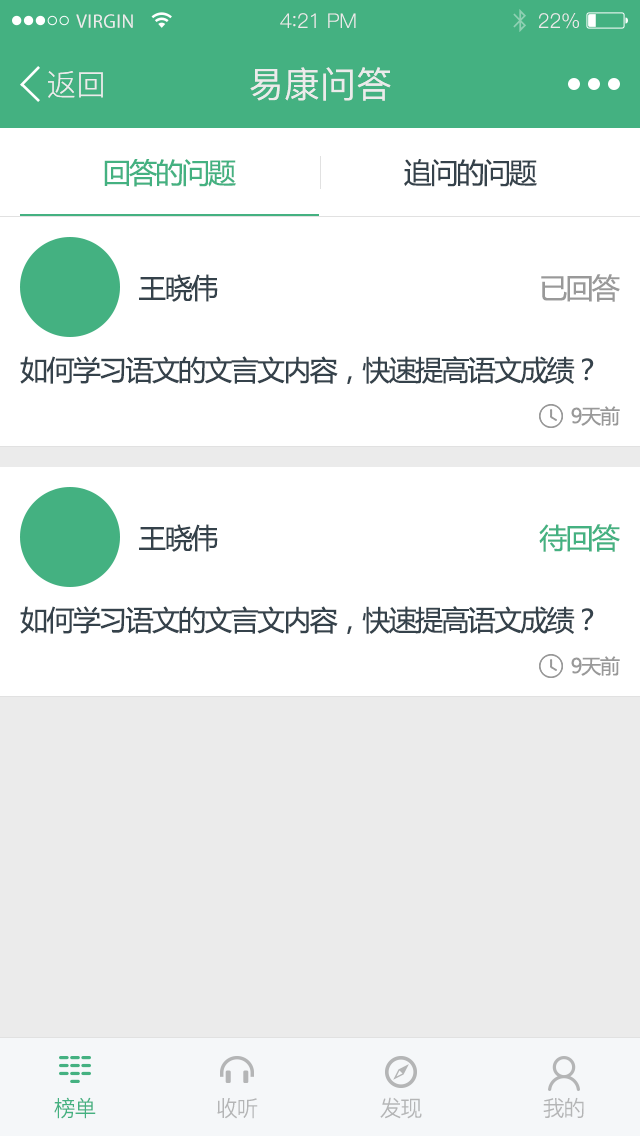
<style>
.page{position:relative;width:640px;height:1136px;background:#ffffff}
.page>*{position:absolute;margin:0}
.t1{font:19.6px "MyriadPro-Regular";letter-spacing:0.02em;color:#ebebeb}
.t2{font:20.4px "PingFang-SC-Regular";letter-spacing:-0.02em;color:#ebebeb}
.t3{font:22.1px "PingFang-SC-Regular";letter-spacing:-0.02em;color:#ebebeb}
.t4{font:30px "PingFang-SC-Regular";color:#ebebeb}
.t5{font:36px "PingFang-SC-Medium";color:#ebebeb}
.t6{font:28px "MicrosoftYaHei";letter-spacing:-0.06em;color:#44b181}
.t7{font:28px "MicrosoftYaHei";letter-spacing:-0.06em;color:#35424b}
.t8{font:28px "MicrosoftYaHei";letter-spacing:-0.06em;color:#999999}
.t9{font:20px "MicrosoftYaHei";letter-spacing:-0.06em;color:#999999}
.t10{font:22px "PingFang-SC-Regular";letter-spacing:-0.06em;color:#44b181}
.t11{font:22px "PingFang-SC-Regular";letter-spacing:-0.06em;color:#b4b5b6}
</style>
<div class="page">
<p class="t1" style="left:76px;top:14px;width:57px;height:14px">VIRGIN</p>
<p class="t2" style="left:280px;top:13px;width:76px;height:15px">4<span class="t3">:</span>21 PM</p>
<p class="t2" style="left:539px;top:13px;width:40px;height:16px">22%</p>
<p class="t4" style="left:48px;top:71px;width:55px;height:27px">返回</p>
<p class="t5" style="left:250px;top:67px;width:141px;height:34px">易康问答</p>
<p class="t6" style="left:104px;top:159px;width:132px;height:28px">回答的问题</p>
<p class="t7" style="left:404px;top:159px;width:133px;height:28px">追问的问题</p>
<p class="t7" style="left:139px;top:274px;width:79px;height:28px">王晓伟</p>
<p class="t8" style="left:541px;top:274px;width:79px;height:28px">已回答</p>
<p class="t7" style="left:20px;top:356px;width:574px;height:28px">如何学习语文的文言文内容，快速提高语文成绩？</p>
<p class="t9" style="left:571px;top:406px;width:49px;height:20px">9天前</p>
<p class="t7" style="left:139px;top:524px;width:79px;height:28px">王晓伟</p>
<p class="t6" style="left:539px;top:524px;width:81px;height:28px">待回答</p>
<p class="t7" style="left:20px;top:606px;width:574px;height:28px">如何学习语文的文言文内容，快速提高语文成绩？</p>
<p class="t9" style="left:571px;top:656px;width:49px;height:20px">9天前</p>
<p class="t10" style="left:54px;top:1097px;width:42px;height:22px">榜单</p>
<p class="t11" style="left:380px;top:1097px;width:42px;height:22px">发现</p>
<p class="t11" style="left:543px;top:1097px;width:41px;height:21px">我的</p>
<p class="t11" style="left:217px;top:1098px;width:41px;height:21px">收听</p>
</div>
